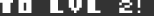
<style>
.page{position:relative;width:154px;height:16px;background:#333333}
.page>*{position:absolute;margin:0}
.t1{font:20.8px "I-pixel-u";letter-spacing:0.14em;color:#ffffff}
</style>
<div class="page">
<p class="t1" style="left:0px;top:0px;width:141px;height:13px">TO LVL 2!</p>
</div>
